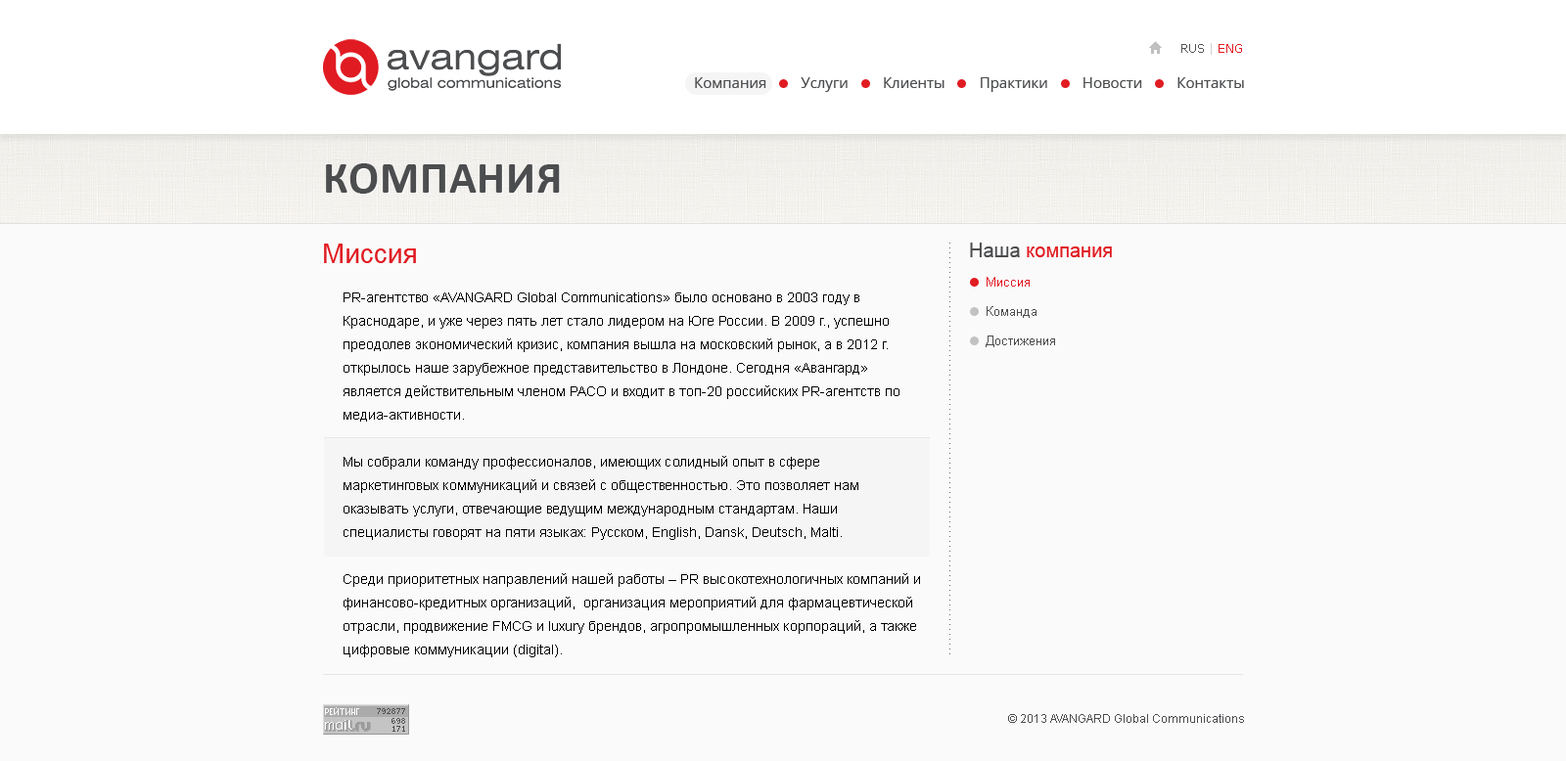
<style>
.page{position:relative;width:1566px;height:761px;background:#fafafa}
.page>*{position:absolute;margin:0}
.t1{font:11.7px "Verdana";color:#555555}
.t2{font:11.7px "Verdana";color:#d1d1d1}
.t3{font:11.7px "Verdana";color:#e11b22}
.t4{font:14.7px "OpenSans";color:#4c4d4f}
.t5{font:45px "Calibri-Bold";letter-spacing:0.02em;color:#4c4d4f;text-transform:uppercase}
.t6{font:27.4px "ArialMT";color:#e11b22}
.t7{font:19.6px "ArialMT";color:#e11b22}
.t8{font:19.6px "ArialMT";color:#4c4d4f}
.t9{font:12.7px/29.4px "ArialMT";color:#4c4d4f}
.t10{font:12.7px/29.4px "ArialMT";color:#e11b22}
.t11{font:13.7px/23.5px "ArialMT";color:#000000}
.t12{font:11.7px "ArialMT";color:#4c4d4f}
</style>
<div class="page">
<p class="t1" style="left:1181px;top:43px;width:61px;height:12px">RUS<span class="t2"> | </span><span class="t3">ENG</span></p>
<p class="t4" style="left:695px;top:77px;width:549px;height:15px">Компания         Услуги         Клиенты         Практики         Новости         Контакты</p>
<p class="t5" style="left:326px;top:163px;width:234px;height:31px">Компания</p>
<p class="t6" style="left:324px;top:244px;width:92px;height:19px">Миссия</p>
<p class="t7" style="left:970px;top:243px;width:142px;height:14px"><span class="t8">Наша </span>компания</p>
<p class="t9" style="left:986px;top:277px;width:69px;height:70px"><span class="t10">Миссия<br></span>Команда<br>Достижения</p>
<p class="t11" style="left:344px;top:293px;width:576px;height:365px">PR-агентство «AVANGARD Global Communications» было основано в 2003 году в Краснодаре, и уже через пять лет стало лидером на Юге России. В 2009 г., успешно преодолев экономический кризис, компания вышла на московский рынок, а в 2012 г. открылось наше зарубежное представительство в Лондоне. Сегодня «Авангард» является действительным членом РАСО и входит в топ-20 российских PR-агентств по медиа-активности. <br><br>Мы собрали команду профессионалов, имеющих солидный опыт в сфере маркетинговых коммуникаций и связей с общественностью. Это позволяет нам оказывать услуги, отвечающие ведущим международным стандартам. Наши специалисты говорят на пяти языках: Русском, English, Dansk, Deutsch, Malti. <br> <br>Среди приоритетных направлений нашей работы – PR высокотехнологичных компаний и финансово-кредитных организаций,  организация мероприятий для фармацевтической отрасли, продвижение FMCG и luxury брендов, агропромышленных корпораций, а также цифровые коммуникации (digital).</p>
<p class="t12" style="left:1008px;top:714px;width:236px;height:9px">© 2013 AVANGARD Global Communications</p>
</div>
